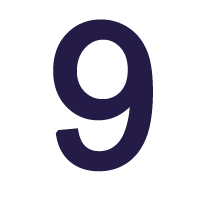
<style>
.page{position:relative;width:200px;height:200px;background:#ffffff}
.page>*{position:absolute;margin:0}
.t1{font:200px "ArialMT";color:#241b47;font-weight:bold}
</style>
<div class="page">
<p class="t1" style="left:53px;top:19px;width:100px;height:153px">9</p>
</div>
